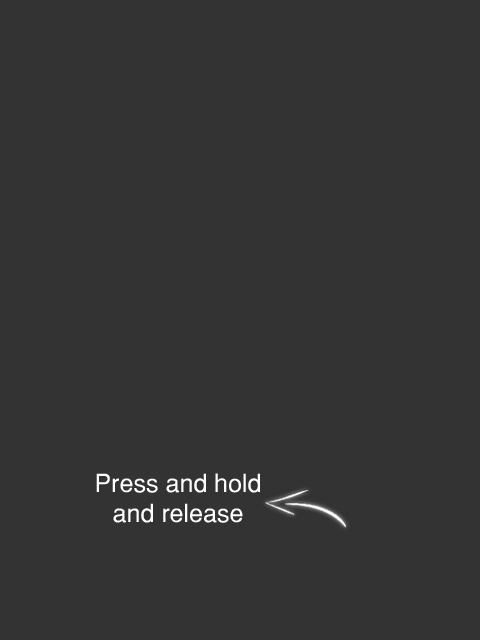
<style>
.page{position:relative;width:480px;height:640px;background:#333333}
.page>*{position:absolute;margin:0}
.t1{font:25px "Helvetica-Normal";color:#ffffff}
</style>
<div class="page">
<p class="t1" style="left:96px;top:473px;width:164px;height:50px;text-align:center">Press and hold<br>and release</p>
</div>
